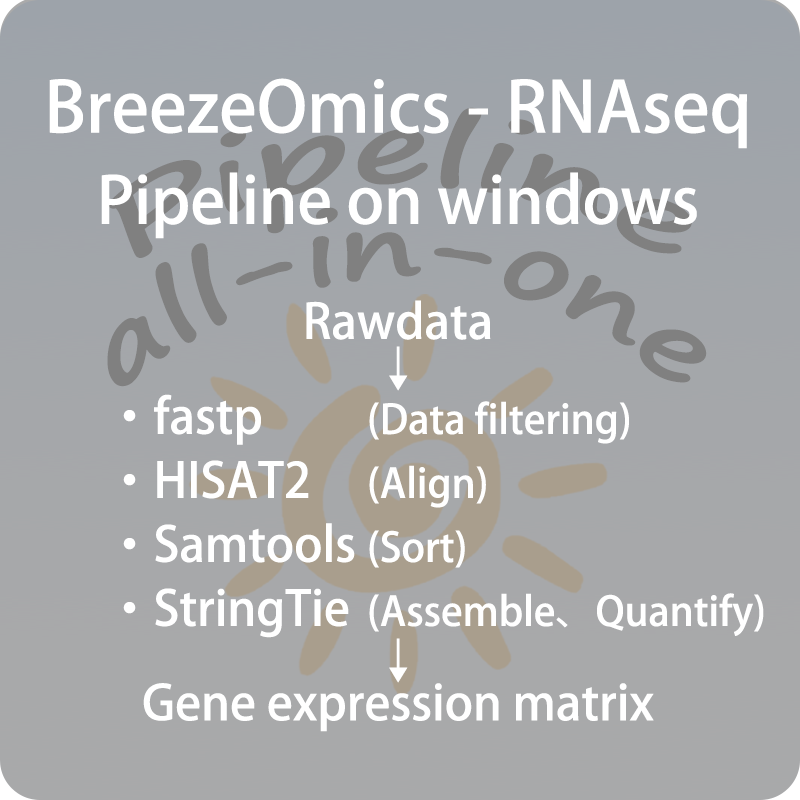
<style>
.page{position:relative;width:800px;height:800px}
.page>*{position:absolute;margin:0}
.t1{font:48px/64px "AdobeHeitiStd-Regular";color:#ffffff}
.t2{font:69.3px/96px "AdobeHeitiStd-Regular";color:#ffffff}
.t3{font:64px/96px "AdobeHeitiStd-Regular";color:#ffffff}
.t4{font:96px/96px "SegoePrint-Bold";color:#808080}
.t5{font:48px/24px "AdobeHeitiStd-Regular";color:#ffffff}
.t6{font:48px/17.3px "AdobeHeitiStd-Regular";color:#ffffff}
.t7{font:40px/64px "AdobeHeitiStd-Regular";color:#ffffff}
</style>
<div class="page">
<p class="t1" style="left:49px;top:78px;width:698px;height:560px;text-align:center"><span class="t2">BreezeOmics - RNAseq</span><span class="t3"> Pipeline on windows<br><br></span><br>          ·fastp<br>          ·HISAT2<br>          ·Samtools<br>          ·StringTie</p>
<p class="t4" style="left:107px;top:107px;width:600px;height:280px;text-align:center">Pipeline<br>all-in-one</p>
<p class="t5" style="left:143px;top:300px;width:511px;height:432px;text-align:center">Rawdata<br><br>↓<br><br><br><br><br><br><br><br><br><br><span class="t6"><br><br><br>↓<br></span><br>Gene expression matrix</p>
<p class="t7" style="left:369px;top:401px;width:395px;height:235px">(Data filtering)<br>(Align)<br>(Sort)<br>(Assemble、Quantify)</p>
</div>
